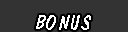
<style>
.page{position:relative;width:128px;height:32px;background:#333333}
.page>*{position:absolute;margin:0}
.t1{font:20.1px "DomDiagonalBT-Regular";letter-spacing:0.075em;color:#ffffff}
</style>
<div class="page">
<p class="t1" style="left:36px;top:15px;width:55px;height:15px">BONUS</p>
</div>
